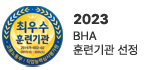
<style>
.page{position:relative;width:150px;height:70px;background:#ffffff}
.page>*{position:absolute;margin:0}
.t1{font:14px "Pretendard-Bold";color:#333333}
.t2{font:12px/14px "Pretendard-Regular";color:#333333}
</style>
<div class="page">
<p class="t1" style="left:74px;top:13px;width:34px;height:12px">2023</p>
<p class="t2" style="left:73px;top:31px;width:64px;height:24px">BHA<br>훈련기관 선정</p>
</div>
